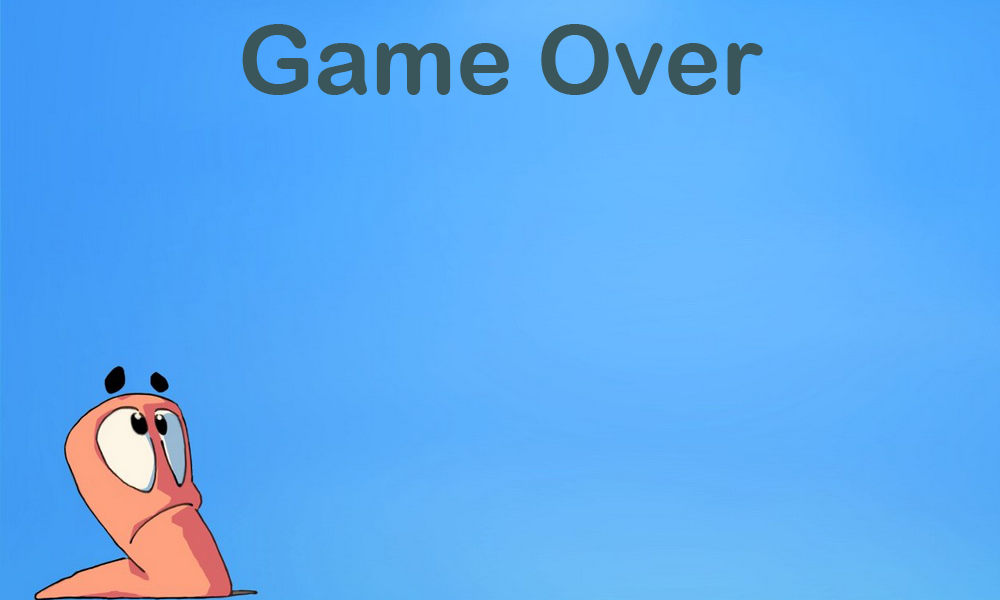
<style>
.page{position:relative;width:1000px;height:600px}
.page>*{position:absolute;margin:0}
.t1{font:96px "ArialRoundedMTBold";color:#3a565b}
</style>
<div class="page">
<p class="t1" style="left:242px;top:24px;width:521px;height:71px">Game Over</p>
</div>
